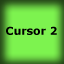
<style>
.page{position:relative;width:64px;height:64px;background:#7df34f}
.page>*{position:absolute;margin:0}
.t1{font:10.8px "Verdana-Bold";color:#000000}
</style>
<div class="page">
<p class="t1" style="left:6px;top:26px;width:51px;height:9px">Cursor 2</p>
</div>
